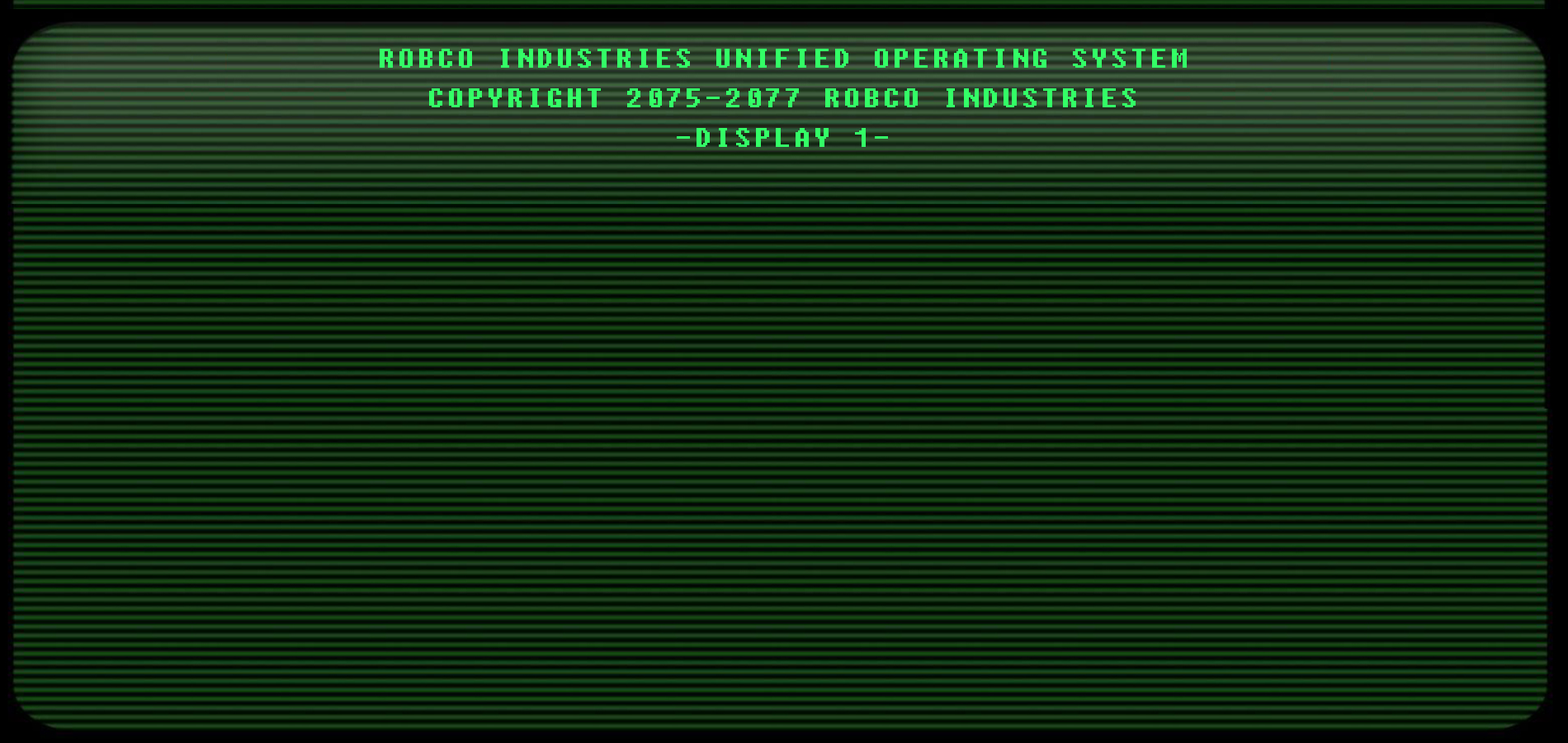
<style>
.page{position:relative;width:1568px;height:743px}
.page>*{position:absolute;margin:0}
.t1{font:33px "FixedsysExcelsiorIIIb";letter-spacing:0.1em;color:#33ff66}
</style>
<div class="page">
<p class="t1" style="left:380px;top:49px;width:807px;height:98px;text-align:center">ROBCO INDUSTRIES UNIFIED OPERATING SYSTEM<br>COPYRIGHT 2075-2077 ROBCO INDUSTRIES<br>-DISPLAY 1-</p>
</div>
